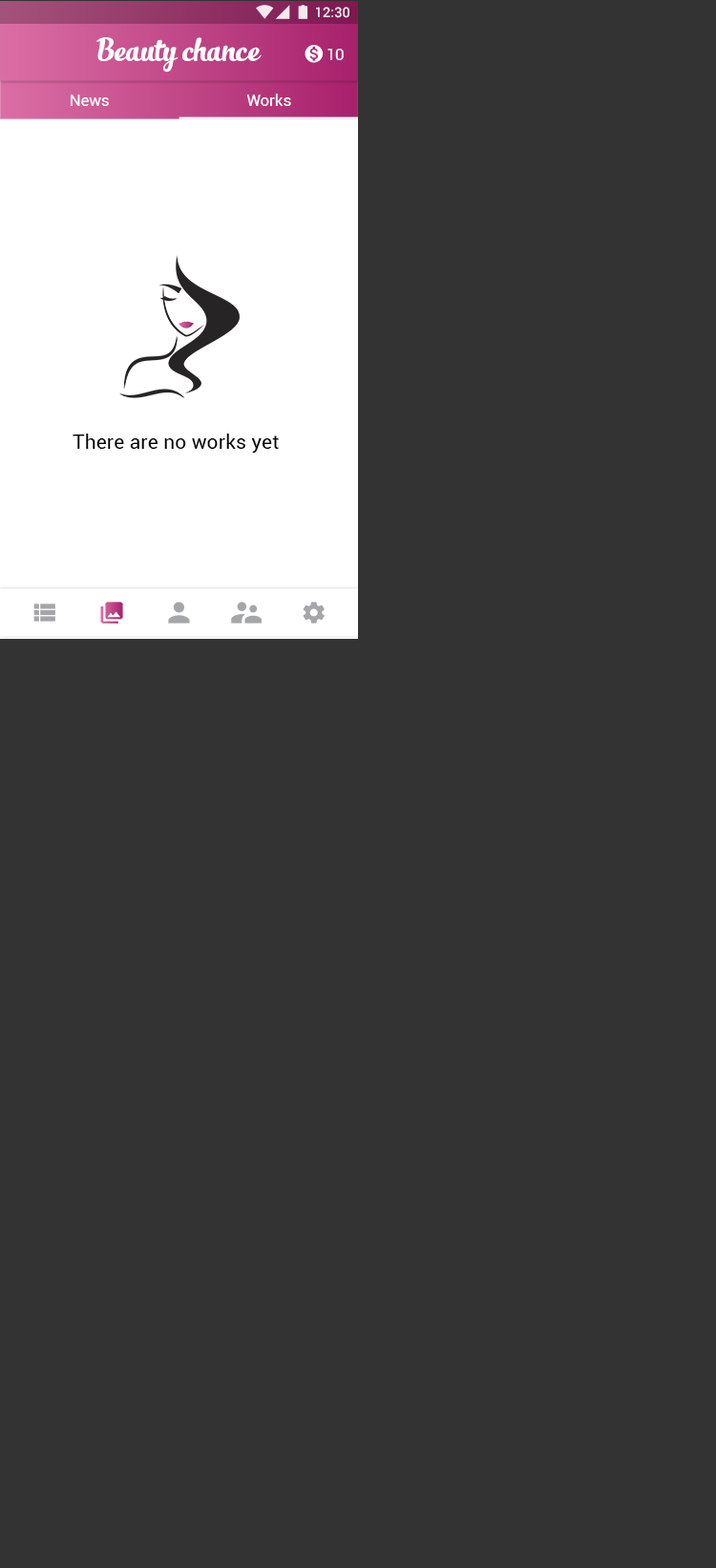
<style>
.page{position:relative;width:716px;height:1568px;background:#333333}
.page>*{position:absolute;margin:0}
.t1{font:13.9px "Roboto-Medium";color:#ffffff}
.t2{font:23.9px "SlimTony-Italic";color:#ffffff}
.t3{font:15.9px "Roboto-Regular";letter-spacing:-0.015em;color:#ffffff}
.t4{font:15.9px "Roboto-Regular";color:#ffffff}
.t5{font:19.9px "Roboto-Regular";letter-spacing:0.01em;color:#000000}
</style>
<div class="page">
<p class="t1" style="left:316px;top:7px;width:34px;height:11px">12:30</p>
<p class="t2" style="left:96px;top:37px;width:166px;height:36px">Beauty chance</p>
<p class="t3" style="left:328px;top:49px;width:16px;height:11px">10</p>
<p class="t4" style="left:71px;top:95px;width:38px;height:11px">News</p>
<p class="t4" style="left:246px;top:94px;width:45px;height:12px">Works</p>
<p class="t5" style="left:73px;top:434px;width:206px;height:19px">There are no works yet</p>
</div>
